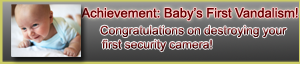
<style>
.page{position:relative;width:300px;height:64px}
.page>*{position:absolute;margin:0}
.t1{font:13px "ArialMT";color:#660000}
.t2{font:12px "ArialMT"}
</style>
<div class="page">
<p class="t1" style="left:81px;top:8px;width:217px;height:13px">Achievement: Baby’s First Vandalism!</p>
<p class="t2" style="left:100px;top:25px;width:187px;height:13px">Congratulations on destroying your</p>
<p class="t2" style="left:102px;top:39px;width:110px;height:13px">first security camera!</p>
</div>
